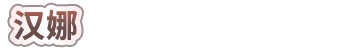
<style>
.page{position:relative;width:360px;height:50px;background:#ffffff}
.page>*{position:absolute;margin:0}
.t1{font:32px "SourceHanSansSC-Bold";font-weight:bold}
</style>
<div class="page">
<p class="t1" style="left:14px;top:9px;width:64px;height:32px">汉娜</p>
</div>
